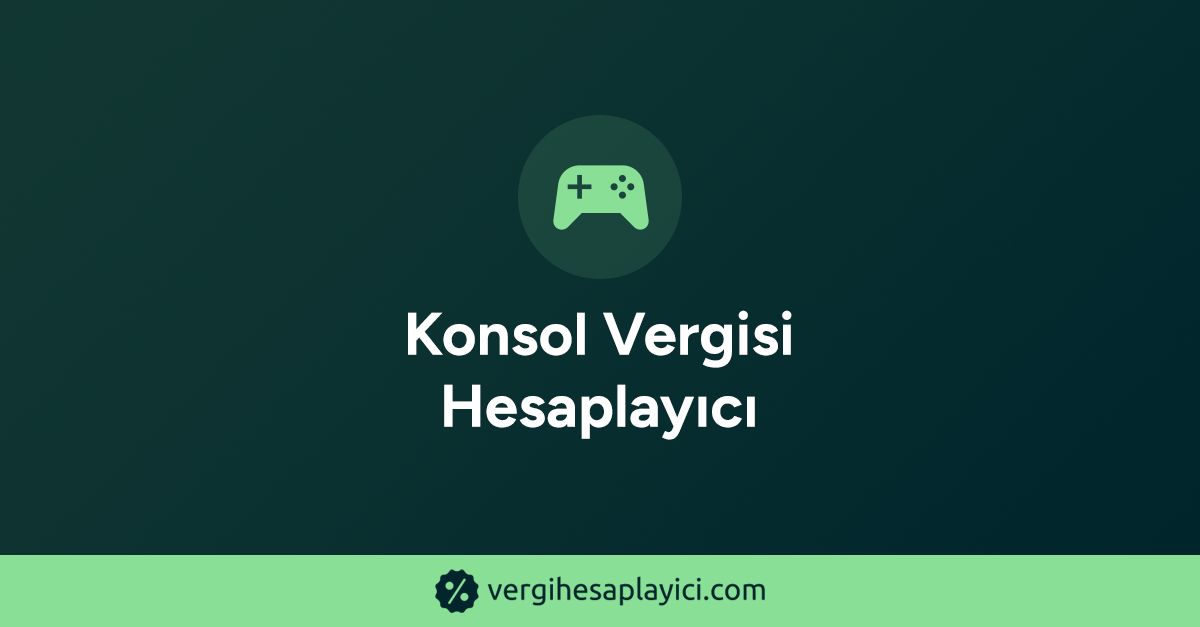
<style>
.page{position:relative;width:1200px;height:627px}
.page>*{position:absolute;margin:0}
.t1{font:60px "Figtree-Bold";color:#ffffff;font-weight:bold}
</style>
<div class="page">
<p class="t1" style="left:408px;top:310px;width:384px;height:130px;text-align:center">Konsol Vergisi<br>Hesaplayıcı</p>
</div>
